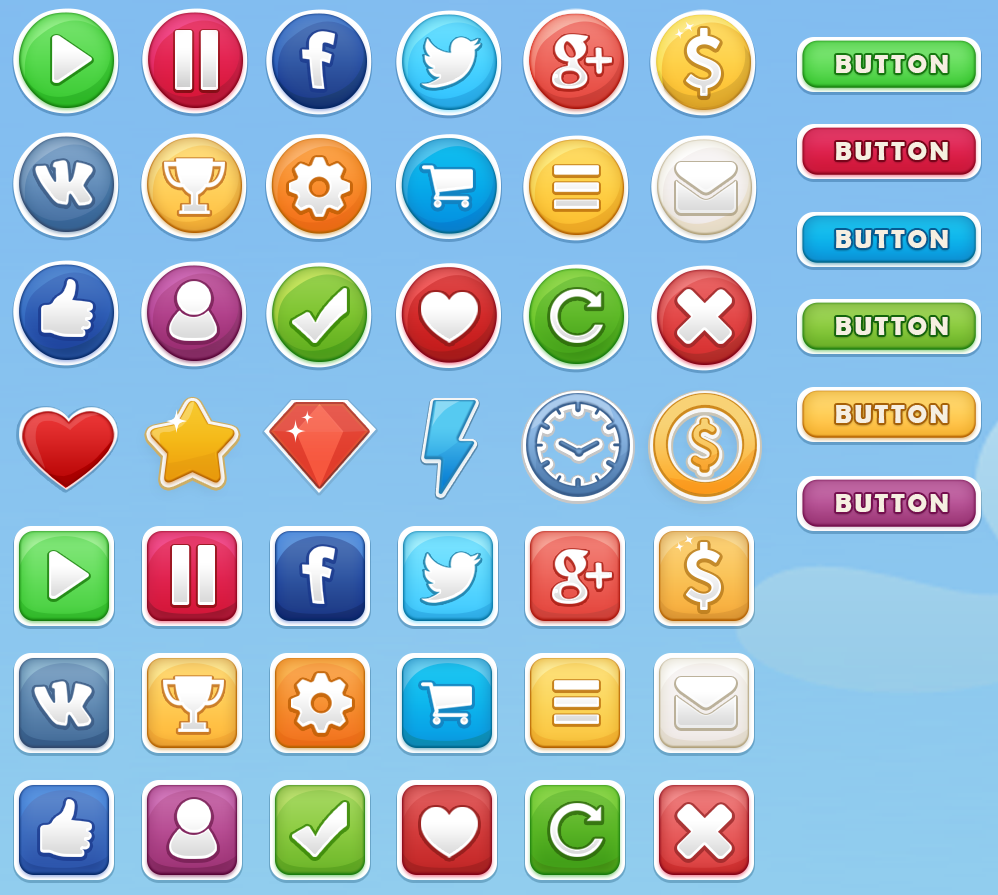
<style>
.page{position:relative;width:998px;height:895px}
.page>*{position:absolute;margin:0}
.t1{font:26px "BerlinSansFBDemi-Bold";letter-spacing:0.1em;color:#f6efe1;text-transform:uppercase}
</style>
<div class="page">
<p class="t1" style="left:836px;top:55px;width:112px;height:18px">BUTTON</p>
<p class="t1" style="left:836px;top:142px;width:112px;height:18px">BUTTON</p>
<p class="t1" style="left:836px;top:230px;width:112px;height:18px">BUTTON</p>
<p class="t1" style="left:836px;top:317px;width:112px;height:18px">BUTTON</p>
<p class="t1" style="left:836px;top:405px;width:112px;height:18px">BUTTON</p>
<p class="t1" style="left:836px;top:494px;width:112px;height:18px">BUTTON</p>
</div>
